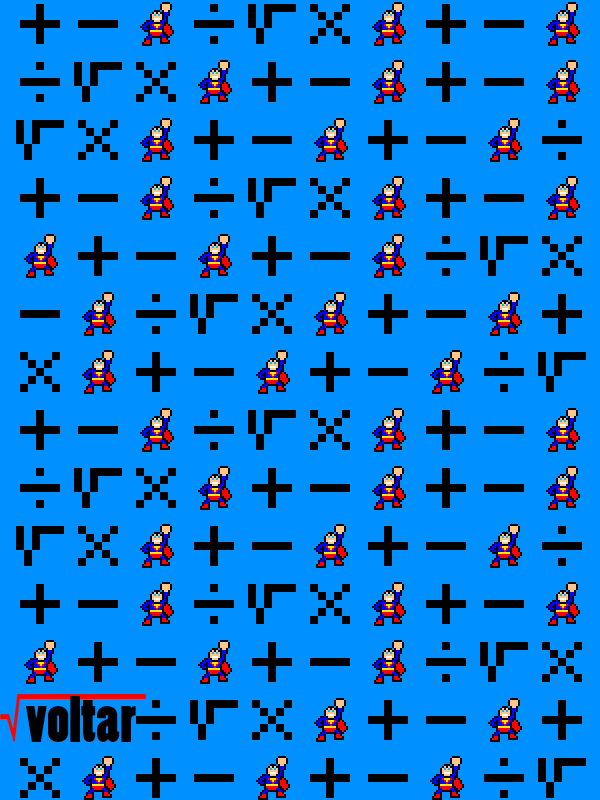
<style>
.page{position:relative;width:600px;height:800px;background:#0090ff}
.page>*{position:absolute;margin:0}
.t1{font:60px "PoplarStd";color:#000000}
</style>
<div class="page">
<p class="t1" style="left:26px;top:696px;width:110px;height:46px">voltar</p>
</div>
